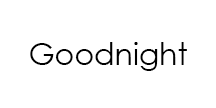
<style>
.page{position:relative;width:216px;height:108px;background:#ffffff}
.page>*{position:absolute;margin:0}
.t1{font:30px "CenturyGothic";color:#000000}
</style>
<div class="page">
<p class="t1" style="left:30px;top:42px;width:157px;height:29px">Goodnight</p>
</div>
